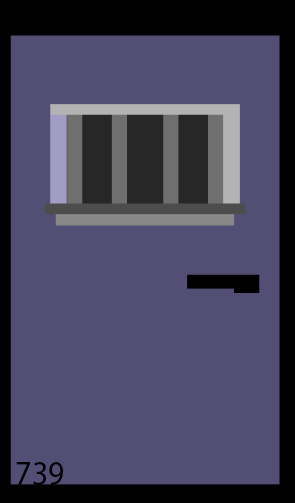
<style>
.page{position:relative;width:295px;height:503px;background:#524e74}
.page>*{position:absolute;margin:0}
.t1{font:34.4px "MyriadPro-Regular";color:#000000;scale:0.93 1}
</style>
<div class="page">
<p class="t1" style="left:16px;top:462px;width:47px;height:23px">739</p>
</div>
